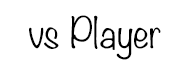
<style>
.page{position:relative;width:191px;height:83px;background:#ffffff}
.page>*{position:absolute;margin:0}
.t1{font:37.5px "Noteworthy-Light";color:#000000}
</style>
<div class="page">
<p class="t1" style="left:29px;top:15px;width:132px;height:45px">vs Player</p>
</div>
